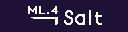
<style>
.page{position:relative;width:128px;height:32px;background:#1d1135}
.page>*{position:absolute;margin:0}
.t1{font:10px "BonvenoCF-Light";letter-spacing:0.005em;color:#ffffff;font-weight:bold}
.t2{font:18px "BonvenoCF-Light";letter-spacing:0.005em;color:#ffffff;font-weight:bold}
</style>
<div class="page">
<p class="t1" style="left:28px;top:6px;width:17px;height:8px">ML</p>
<p class="t1" style="left:51px;top:6px;width:7px;height:8px">4</p>
<p class="t2" style="left:64px;top:10px;width:38px;height:15px">Salt</p>
</div>
